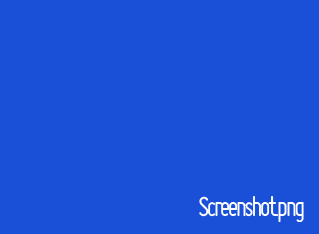
<style>
.page{position:relative;width:319px;height:234px;background:#1a50d8}
.page>*{position:absolute;margin:0}
.t1{font:30px "Miso";letter-spacing:-0.1em;color:#ffffff}
</style>
<div class="page">
<p class="t1" style="left:199px;top:196px;width:105px;height:26px">Screenshot.png</p>
</div>
